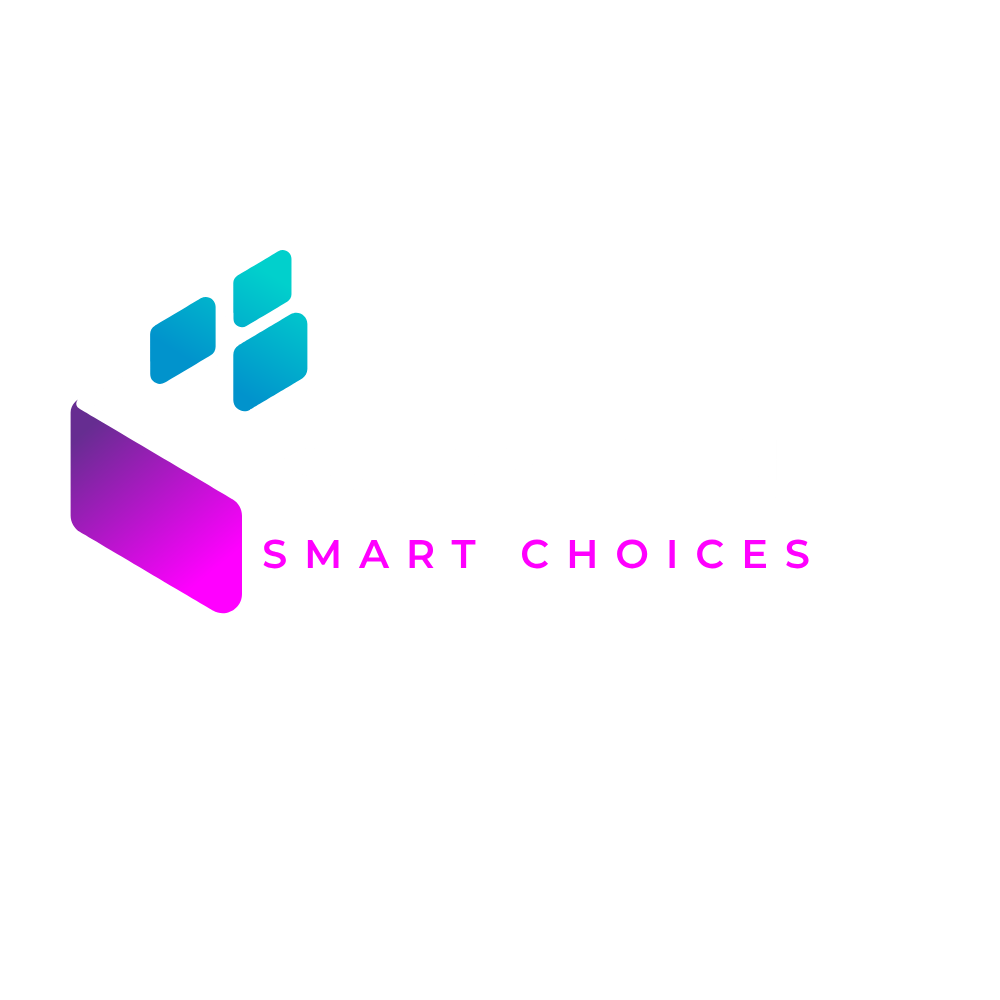
<style>
.page{position:relative;width:1000px;height:1000px;background:#ffffff}
.page>*{position:absolute;margin:0}
.t1{font:40px "Montserrat-SemiBold";letter-spacing:0.42em;color:#ff00ff}
</style>
<div class="page">
<p class="t1" style="left:263px;top:539px;width:546px;height:30px">SMART CHOICES</p>
</div>
